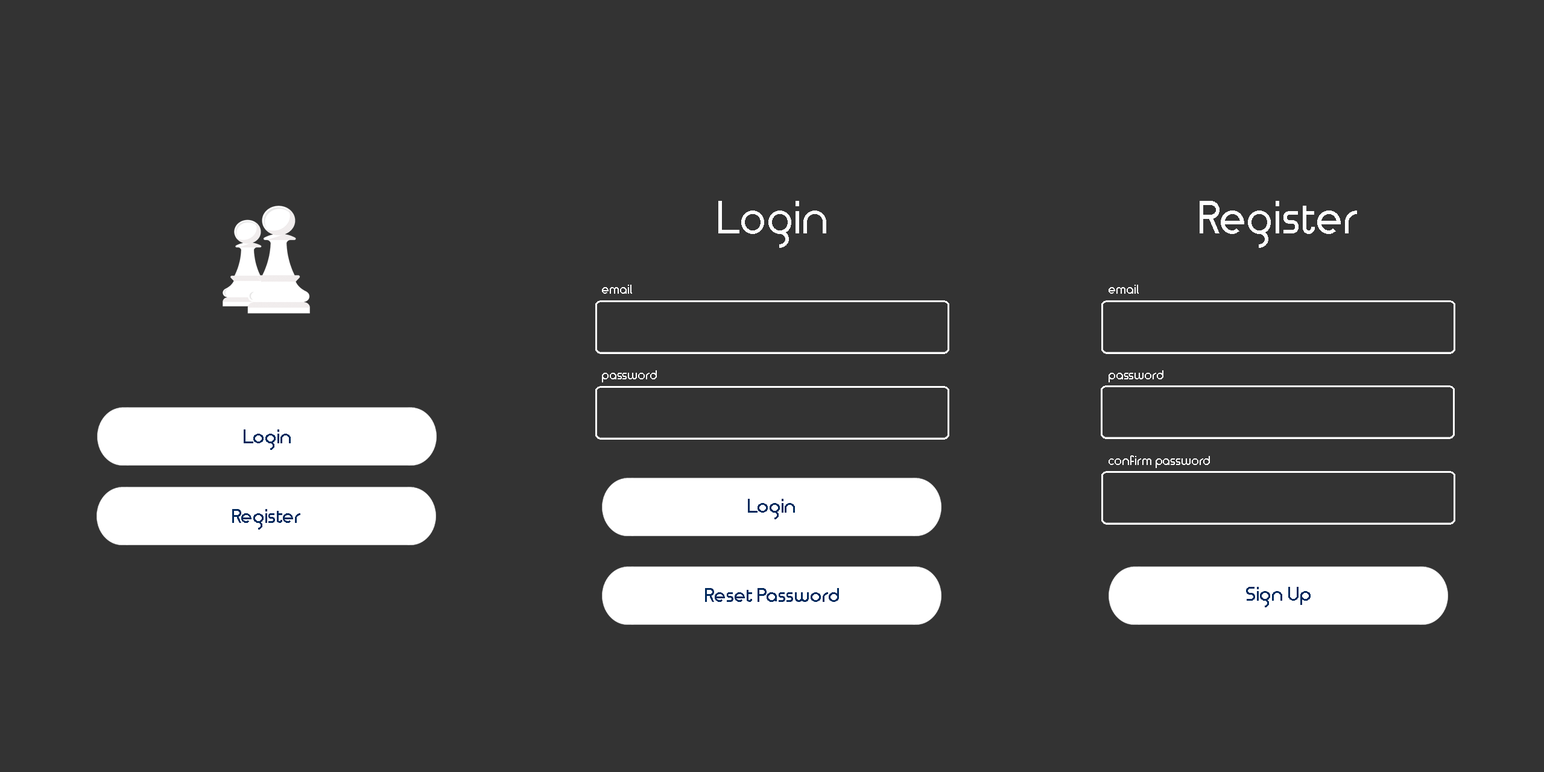
<style>
.page{position:relative;width:1544px;height:772px;background:#333333}
.page>*{position:absolute;margin:0}
.t1{font:44.7px "TimeBurner-Bold";color:#ffffff}
.t2{font:12.8px "TimeBurner-Bold";color:#ffffff}
.t3{font:19.2px "TimeBurner-Bold";color:#00295d}
</style>
<div class="page">
<p class="t1" style="left:718px;top:201px;width:108px;height:47px">Login</p>
<p class="t1" style="left:1200px;top:201px;width:157px;height:47px">Register</p>
<p class="t2" style="left:602px;top:285px;width:30px;height:9px">email</p>
<p class="t2" style="left:1109px;top:285px;width:30px;height:9px">email</p>
<p class="t2" style="left:602px;top:370px;width:55px;height:12px">password</p>
<p class="t2" style="left:1109px;top:370px;width:55px;height:12px">password</p>
<p class="t3" style="left:244px;top:430px;width:47px;height:20px">Login</p>
<p class="t2" style="left:1109px;top:455px;width:101px;height:13px">confirm password</p>
<p class="t3" style="left:232px;top:509px;width:68px;height:21px">Register</p>
<p class="t3" style="left:748px;top:499px;width:47px;height:20px">Login</p>
<p class="t3" style="left:705px;top:588px;width:134px;height:14px">Reset Password</p>
<p class="t3" style="left:1246px;top:587px;width:65px;height:20px">Sign Up</p>
</div>
